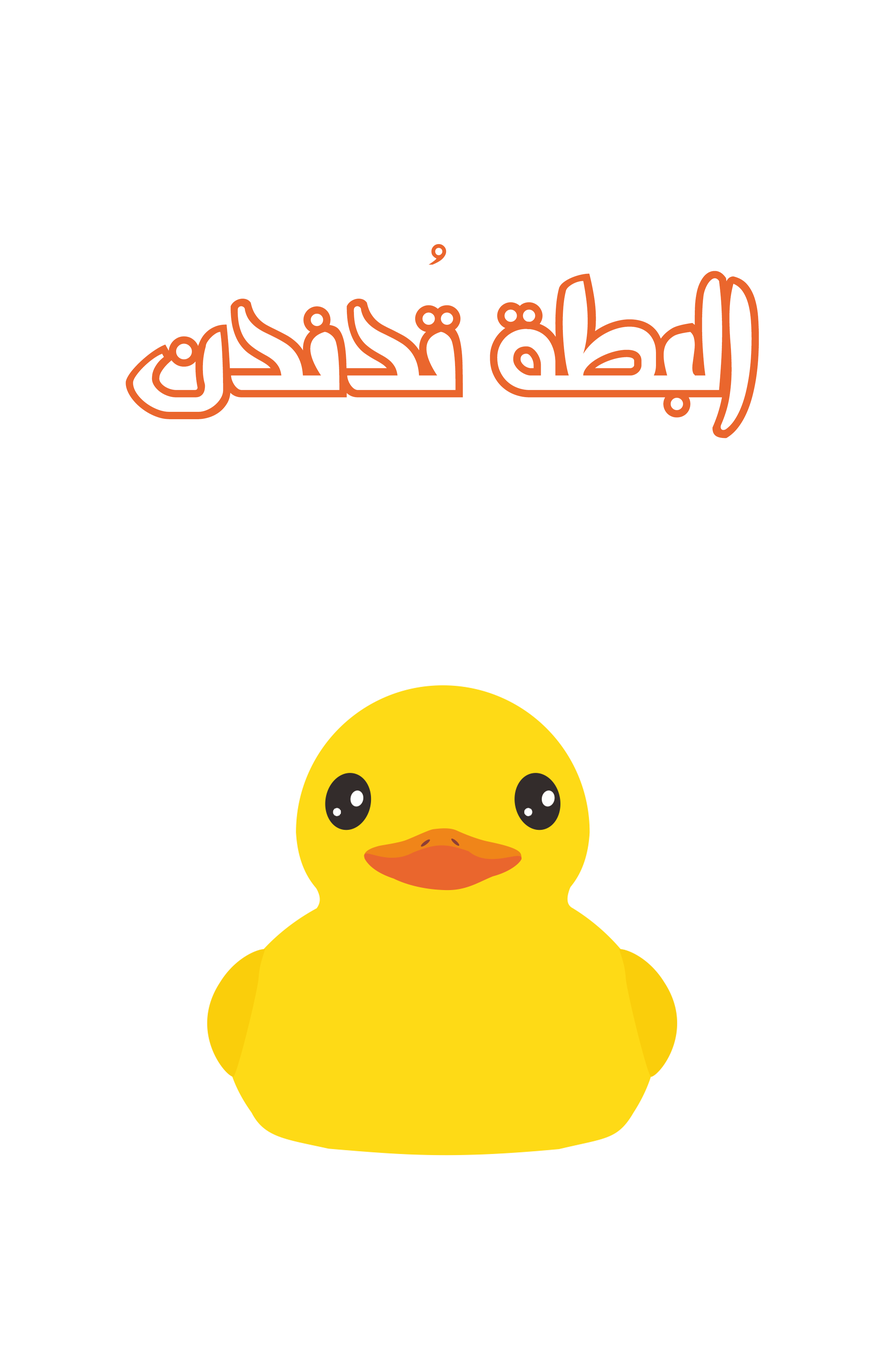
<style>
.page{position:relative;width:884px;height:1350px;background:#ffffff}
.page>*{position:absolute;margin:0}
.t1{font:232.6px "AGABalloon";color:#ea662d}
</style>
<div class="page">
<p class="t1" style="left:126px;top:244px;width:633px;height:194px">البطة تُدندن</p>
</div>
